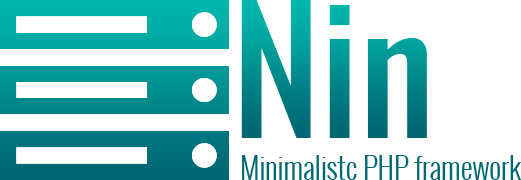
<style>
.page{position:relative;width:521px;height:180px;background:#ffffff}
.page>*{position:absolute;margin:0}
.t1{font:156.6px "Oswald-Regular"}
.t2{font:29.6px "Oswald-Light";color:#006773}
</style>
<div class="page">
<p class="t1" style="left:241px;top:0px;width:186px;height:138px">Nin</p>
<p class="t2" style="left:242px;top:155px;width:279px;height:25px">Minimalistc PHP framework</p>
</div>
